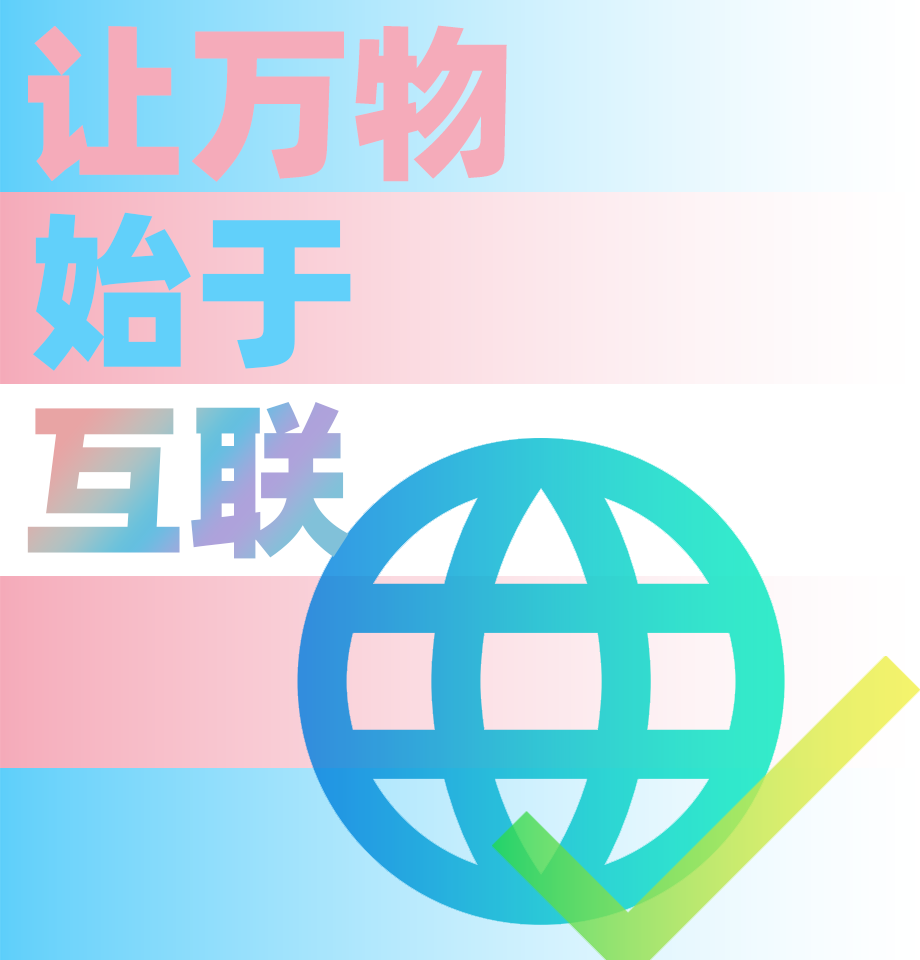
<style>
.page{position:relative;width:920px;height:960px}
.page>*{position:absolute;margin:0}
.t1{font:167.2px "AlibabaPuHuiTi-Heavy";color:#f5abba}
.t2{font:167.2px "AlibabaPuHuiTi-Heavy";color:#61d0fa}
.t3{font:167.2px "AlibabaPuHuiTi-Heavy"}
</style>
<div class="page">
<p class="t1" style="left:28px;top:25px;width:479px;height:157px">让万物</p>
<p class="t2" style="left:33px;top:212px;width:318px;height:159px">始于</p>
<p class="t3" style="left:27px;top:402px;width:322px;height:157px">互联</p>
</div>
